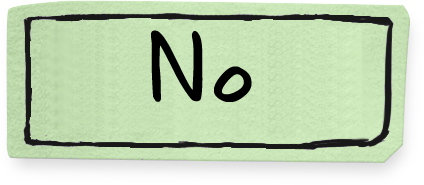
<style>
.page{position:relative;width:424px;height:185px}
.page>*{position:absolute;margin:0}
.t1{font:100px "MarkerSD";color:#000000}
</style>
<div class="page">
<p class="t1" style="left:151px;top:30px;width:101px;height:72px">No</p>
</div>
